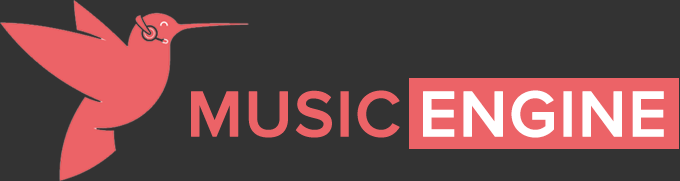
<style>
.page{position:relative;width:680px;height:181px;background:#333333}
.page>*{position:absolute;margin:0}
.t1{font:67px "ProximaNova-Semibold";color:#ec6367;text-transform:uppercase;font-weight:bold}
.t2{font:67px "ProximaNova-Semibold";color:#ffffff;text-transform:uppercase;font-weight:bold}
</style>
<div class="page">
<p class="t1" style="left:191px;top:90px;width:209px;height:48px">music</p>
<p class="t2" style="left:423px;top:90px;width:241px;height:48px">engine</p>
</div>
